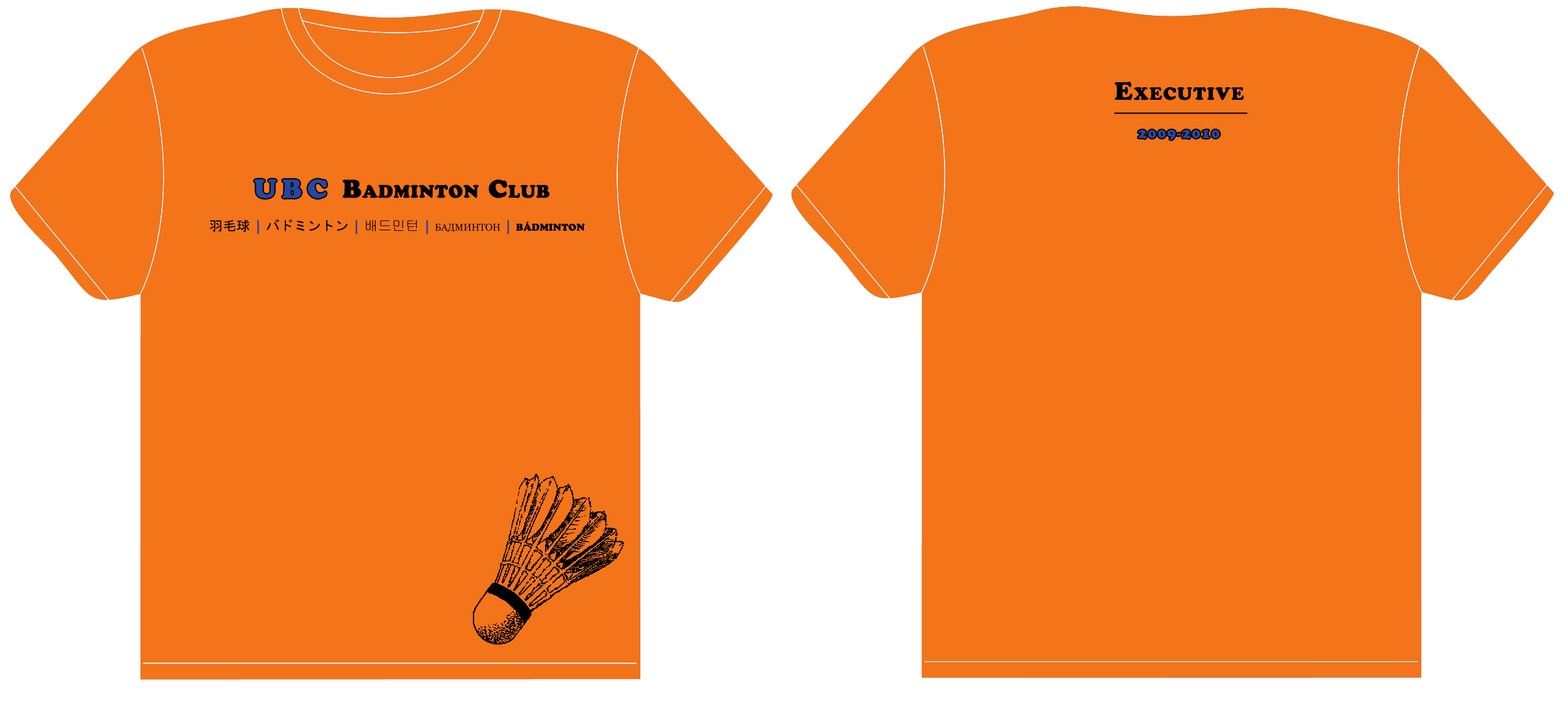
<style>
.page{position:relative;width:1568px;height:721px;background:#f47419}
.page>*{position:absolute;margin:0}
.t1{font:25.1px "CooperBlackStd";letter-spacing:0.05em;color:#000000;font-variant:small-caps}
.t2{font:13.8px "CooperBlackStd";letter-spacing:0.075em;color:#2647a3;font-variant:small-caps}
.t3{font:26.3px "CooperBlackStd";letter-spacing:0.2em;color:#2647a3;font-variant:small-caps}
.t4{font:13.8px "Georgia";color:#000000;font-variant:small-caps}
.t5{font:13.8px "MS-Gothic";color:#000000;font-variant:small-caps}
.t6{font:13.8px "CooperBlackStd";color:#2647a3;font-variant:small-caps}
.t7{font:13.8px "Gulim";color:#000000;font-variant:small-caps}
.t8{font:13.8px "CooperBlackStd";color:#000000;font-variant:small-caps}
</style>
<div class="page">
<p class="t1" style="left:1115px;top:82px;width:129px;height:18px">Executive</p>
<p class="t2" style="left:1138px;top:130px;width:82px;height:10px">2009-2010</p>
<p class="t3" style="left:254px;top:179px;width:73px;height:19px">UBC</p>
<p class="t4" style="left:209px;top:219px;width:376px;height:15px"><span class="t5">羽毛球 </span><span class="t6">| </span><span class="t5">バドミントン </span><span class="t6">| </span><span class="t7">배드민턴 </span><span class="t6">| </span>бадминтон <span class="t6">| </span><span class="t8">bádminton</span></p>
</div>
